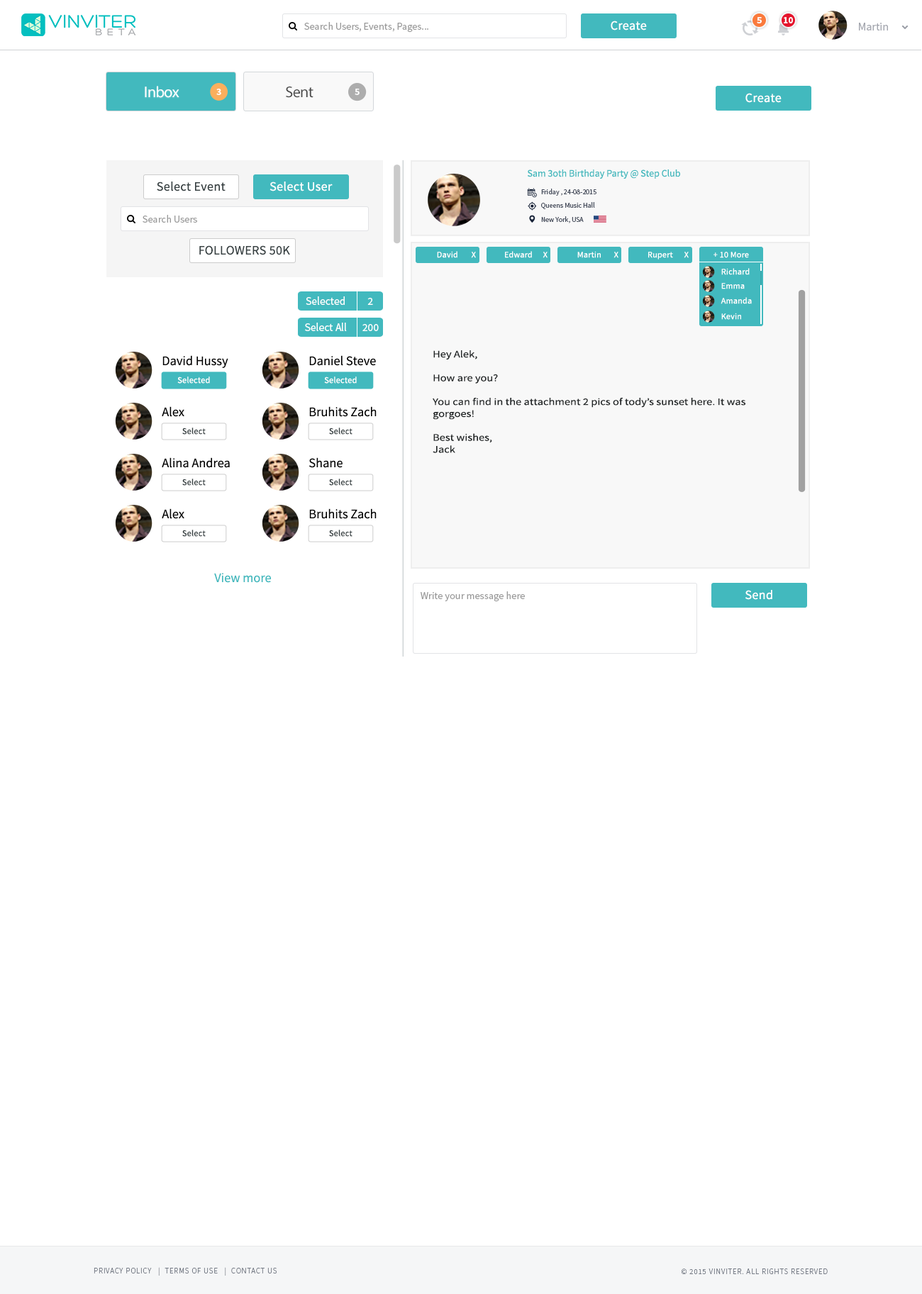
<style>
.page{position:relative;width:922px;height:1294px;background:#ffffff}
.page>*{position:absolute;margin:0}
.t1{font:9.2px "SourceSansPro-Bold";color:#ffffff}
.t2{font:10.2px "SourceSansPro-Regular";color:#999999}
.t3{font:12.8px "SourceSansPro-Regular";letter-spacing:0.02em;color:#ffffff}
.t4{font:11.3px "SourceSansPro-Regular";color:#a3a6ae}
.t5{font:15.6px "MyriadPro-Regular";letter-spacing:-0.025em;color:#ffffff}
.t6{font:9.9px "SourceSansPro-Bold";letter-spacing:-0.025em;color:#ffffff}
.t7{font:15.6px "MyriadPro-Regular";letter-spacing:-0.025em;color:#4b4b4b}
.t8{font:9.9px "SourceSansPro-Regular";color:#42b9be}
.t9{font:12.8px "SourceSansPro-Regular";letter-spacing:0.02em;color:#363f41}
.t10{font:12.8px "SourceSansPro-Regular";letter-spacing:0.02em;color:#feffff}
.t11{font:7.1px/9.2px "SourceSansPro-Regular";color:#464d5c}
.t12{font:8.4px "SourceSansPro-Regular";letter-spacing:0.02em;color:#ffffff}
.t13{font:11.2px "SourceSansPro-Regular";color:#ffffff}
.t14{font:9.9px "SourceSansPro-Regular";color:#202425;scale:1.17 1}
.t15{font:13.1px "SourceSansPro-Regular";color:#000000}
.t16{font:8.8px "SourceSansPro-Regular";letter-spacing:0.02em;color:#ffffff}
.t17{font:8.8px "SourceSansPro-Regular";letter-spacing:0.02em;color:#363f41}
.t18{font:13.1px "SourceSansPro-Regular";color:#42b9be}
.t19{font:7.8px "SourceSansPro-Light";letter-spacing:0.075em;color:#747a85;text-transform:uppercase}
</style>
<div class="page">
<p class="t1" style="left:756px;top:17px;width:5px;height:6px">5</p>
<p class="t1" style="left:783px;top:17px;width:10px;height:6px">10</p>
<p class="t2" style="left:304px;top:22px;width:124px;height:11px">Search Users, Events, Pages...</p>
<p class="t3" style="left:610px;top:21px;width:37px;height:9px">Create</p>
<p class="t4" style="left:859px;top:23px;width:29px;height:7px">Martin</p>
<p class="t5" style="left:145px;top:86px;width:34px;height:12px">Inbox</p>
<p class="t6" style="left:216px;top:89px;width:5px;height:6px">3</p>
<p class="t7" style="left:286px;top:86px;width:27px;height:12px">Sent</p>
<p class="t6" style="left:354px;top:89px;width:5px;height:6px">5</p>
<p class="t3" style="left:745px;top:93px;width:36px;height:10px">Create</p>
<p class="t8" style="left:527px;top:169px;width:153px;height:10px">Sam 3oth Birthday Party @ Step Club</p>
<p class="t9" style="left:157px;top:181px;width:68px;height:10px">Select Event</p>
<p class="t10" style="left:269px;top:181px;width:63px;height:10px">Select User</p>
<p class="t11" style="left:541px;top:189px;width:55px;height:34px">Friday , 24-08-2015<br>Queens Music Hall<br>New York, USA</p>
<p class="t2" style="left:142px;top:215px;width:55px;height:8px">Search Users</p>
<p class="t9" style="left:199px;top:245px;width:91px;height:10px">FOLLOWERS 50K</p>
<p class="t12" style="left:437px;top:251px;width:20px;height:7px">David</p>
<p class="t12" style="left:471px;top:252px;width:5px;height:6px">X</p>
<p class="t12" style="left:505px;top:251px;width:27px;height:7px">Edward</p>
<p class="t12" style="left:542px;top:252px;width:5px;height:6px">X</p>
<p class="t12" style="left:577px;top:251px;width:23px;height:7px">Martin</p>
<p class="t12" style="left:613px;top:252px;width:5px;height:6px">X</p>
<p class="t12" style="left:648px;top:252px;width:25px;height:7px">Rupert</p>
<p class="t12" style="left:683px;top:252px;width:5px;height:6px">X</p>
<p class="t12" style="left:713px;top:252px;width:36px;height:6px">+ 10 More</p>
<p class="t12" style="left:721px;top:268px;width:28px;height:7px">Richard</p>
<p class="t12" style="left:721px;top:283px;width:23px;height:6px">Emma</p>
<p class="t13" style="left:306px;top:296px;width:39px;height:9px">Selected</p>
<p class="t13" style="left:367px;top:298px;width:6px;height:7px">2</p>
<p class="t12" style="left:720px;top:297px;width:31px;height:7px">Amanda</p>
<p class="t12" style="left:721px;top:313px;width:20px;height:7px">Kevin</p>
<p class="t13" style="left:305px;top:323px;width:42px;height:8px">Select All</p>
<p class="t13" style="left:362px;top:324px;width:17px;height:7px">200</p>
<p class="t14" style="left:432px;top:350px;width:313px;height:103px">Hey Alek,<br><br>How are you?<br><br>You can find in the attachment 2 pics of tody’s sunset here. It was gorgoes!<br><br>Best wishes,<br>Jack</p>
<p class="t15" style="left:162px;top:355px;width:66px;height:13px">David Hussy</p>
<p class="t15" style="left:309px;top:355px;width:67px;height:11px">Daniel Steve</p>
<p class="t16" style="left:177px;top:376px;width:33px;height:8px">Selected</p>
<p class="t16" style="left:324px;top:376px;width:33px;height:8px">Selected</p>
<p class="t15" style="left:162px;top:406px;width:22px;height:11px">Alex</p>
<p class="t15" style="left:309px;top:406px;width:67px;height:11px">Bruhits Zach</p>
<p class="t17" style="left:182px;top:427px;width:24px;height:8px">Select</p>
<p class="t17" style="left:329px;top:427px;width:23px;height:8px">Select</p>
<p class="t15" style="left:162px;top:457px;width:68px;height:11px">Alina Andrea</p>
<p class="t15" style="left:309px;top:457px;width:33px;height:11px">Shane</p>
<p class="t17" style="left:182px;top:479px;width:24px;height:7px">Select</p>
<p class="t17" style="left:329px;top:479px;width:23px;height:7px">Select</p>
<p class="t15" style="left:162px;top:508px;width:22px;height:11px">Alex</p>
<p class="t15" style="left:309px;top:508px;width:67px;height:11px">Bruhits Zach</p>
<p class="t17" style="left:182px;top:530px;width:24px;height:7px">Select</p>
<p class="t17" style="left:329px;top:530px;width:23px;height:7px">Select</p>
<p class="t18" style="left:214px;top:573px;width:57px;height:10px">View more</p>
<p class="t2" style="left:420px;top:591px;width:105px;height:11px">Write your message here</p>
<p class="t3" style="left:745px;top:590px;width:27px;height:10px">Send</p>
<p class="t19" style="left:94px;top:1267px;width:183px;height:8px">Privacy Policy   |  Terms of Use   |  Contact us</p>
<p class="t19" style="left:681px;top:1268px;width:146px;height:6px">© 2015 VINVITER. All rights reserved</p>
</div>
